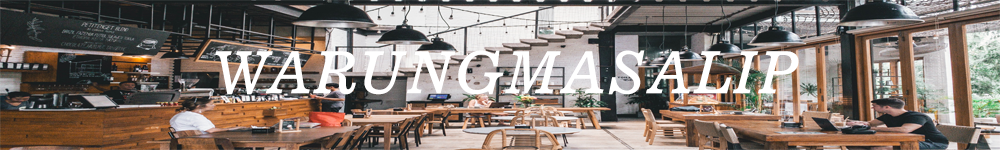
<style>
.page{position:relative;width:1000px;height:150px}
.page>*{position:absolute;margin:0}
.t1{font:58.3px "News701BT-ItalicA";color:#ffffff}
</style>
<div class="page">
<p class="t1" style="left:215px;top:50px;width:584px;height:45px">WARUNGMASALIP</p>
</div>
